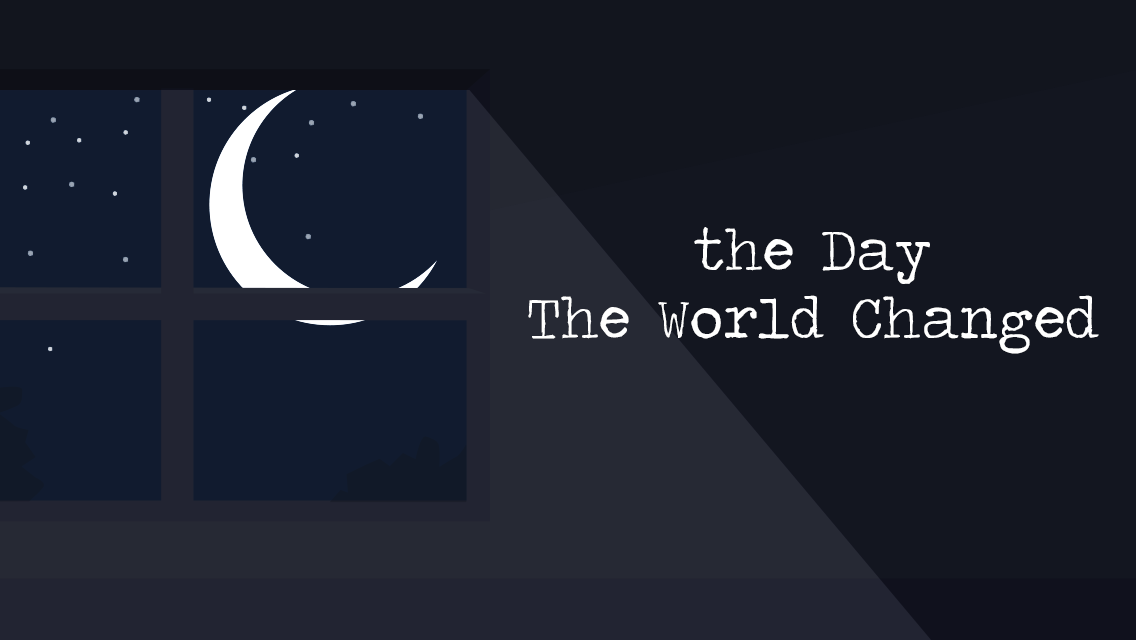
<style>
.page{position:relative;width:1136px;height:640px;background:#131620}
.page>*{position:absolute;margin:0}
.t1{font:59px/68.5px "TravelingTypewriter";color:#ffffff}
</style>
<div class="page">
<p class="t1" style="left:528px;top:227px;width:571px;height:127px;text-align:center">the Day<br>The World Changed</p>
</div>
